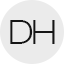
<style>
.page{position:relative;width:64px;height:64px;background:#ebebeb}
.page>*{position:absolute;margin:0}
.t1{font:35px "WalkwayUltraBold";color:#151515}
</style>
<div class="page">
<p class="t1" style="left:10px;top:20px;width:45px;height:24px">DH</p>
</div>
